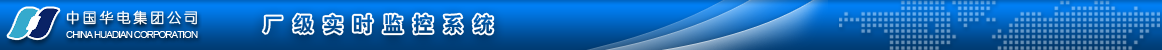
<style>
.page{position:relative;width:1162px;height:50px}
.page>*{position:absolute;margin:0}
.t1{font:14px "YouYuan";letter-spacing:0.18em;color:#ffffff;font-weight:bold}
.t2{font:20px "ç»å¸ç²é»ç®-regular";letter-spacing:0.5em}
.t3{font:10px "ArialMT";letter-spacing:-0.1em;color:#ffffff}
</style>
<div class="page">
<p class="t1" style="left:66px;top:10px;width:131px;height:15px">中国华电集团公司</p>
<p class="t2" style="left:263px;top:14px;width:230px;height:20px">厂级实时监控系统</p>
<p class="t3" style="left:66px;top:31px;width:132px;height:7px">CHINA HUADIAN CORPORATION</p>
</div>
